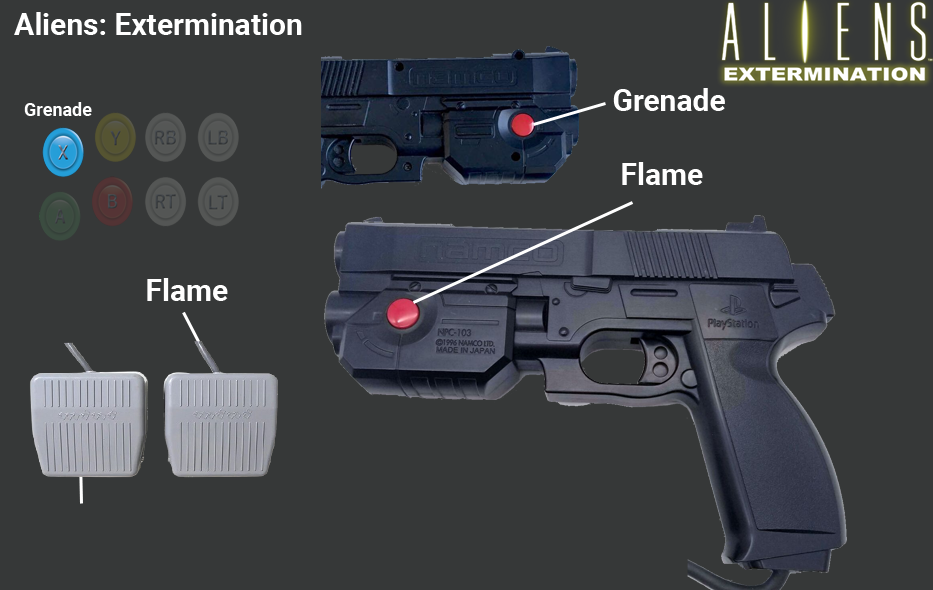
<style>
.page{position:relative;width:933px;height:590px;background:#363838}
.page>*{position:absolute;margin:0}
.t1{font:30px "Roboto-Bold";color:#ffffff}
.t2{font:18px "Roboto-Bold";color:#ffffff}
</style>
<div class="page">
<p class="t1" style="left:14px;top:12px;width:288px;height:23px">Aliens: Extermination</p>
<p class="t1" style="left:613px;top:88px;width:112px;height:23px">Grenade</p>
<p class="t2" style="left:24px;top:102px;width:68px;height:14px">Grenade</p>
<p class="t1" style="left:622px;top:162px;width:81px;height:23px">Flame</p>
<p class="t1" style="left:147px;top:278px;width:81px;height:23px">Flame</p>
</div>
